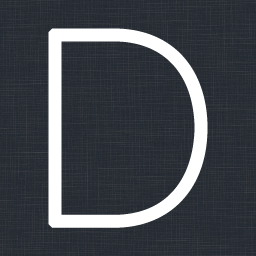
<style>
.page{position:relative;width:256px;height:256px}
.page>*{position:absolute;margin:0}
.t1{font:270px "Raleway-Thin";color:#ffffff;font-weight:bold}
</style>
<div class="page">
<p class="t1" style="left:48px;top:28px;width:160px;height:200px">D</p>
</div>
